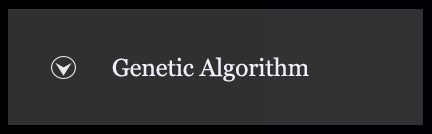
<style>
.page{position:relative;width:432px;height:134px;background:#313030}
.page>*{position:absolute;margin:0}
.t1{font:24.5px "Georgia";letter-spacing:-0.005em;color:#f0effb}
</style>
<div class="page">
<p class="t1" style="left:112px;top:57px;width:197px;height:25px">Genetic Algorithm</p>
</div>
